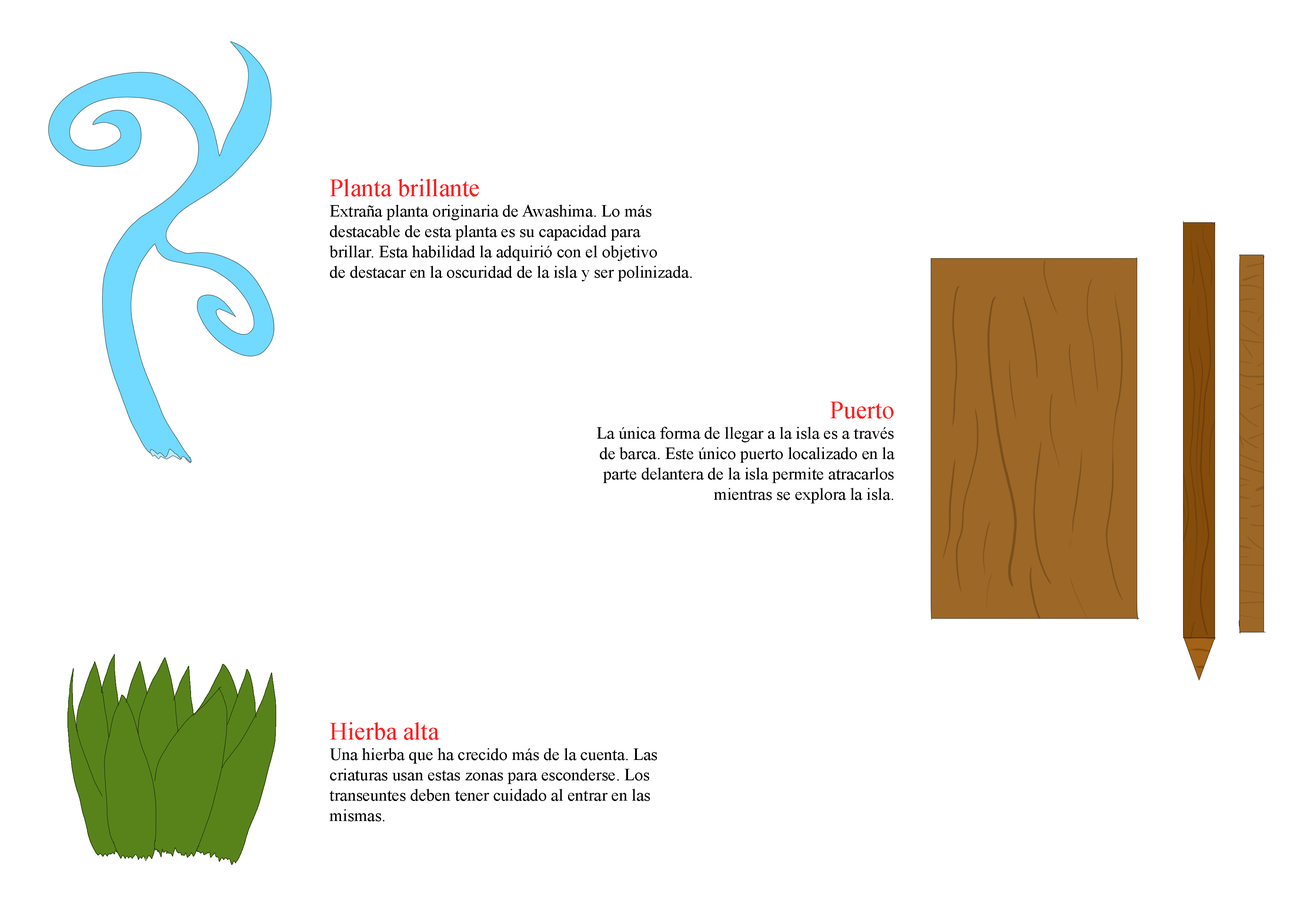
<style>
.page{position:relative;width:1299px;height:918px;background:#ffffff}
.page>*{position:absolute;margin:0}
.t1{font:17px "TimesNewRomanPSMT";color:#000000}
.t2{font:24.7px "TimesNewRomanPSMT";color:#ff2020}
</style>
<div class="page">
<p class="t1" style="left:329px;top:179px;width:363px;height:102px"><span class="t2">Planta brillante<br></span>Extraña planta originaria de Awashima. Lo más <br>destacable de esta planta es su capacidad para <br>brillar. Esta habilidad la adquirió con el objetivo<br>de destacar en la oscuridad de la isla y ser polinizada.</p>
<p class="t1" style="left:597px;top:402px;width:297px;height:102px;text-align:right"><span class="t2">Puerto<br></span>La única forma de llegar a la isla es a través<br>de barca. Este único puerto localizado en la<br>parte delantera de la isla permite atracarlos<br>mientras se explora la isla.</p>
<p class="t1" style="left:329px;top:722px;width:328px;height:100px"><span class="t2">Hierba alta<br></span>Una hierba que ha crecido más de la cuenta. Las<br>criaturas usan estas zonas para esconderse. Los <br>transeuntes deben tener cuidado al entrar en las <br>mismas.</p>
</div>
